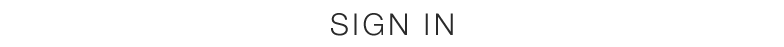
<style>
.page{position:relative;width:784px;height:47px;background:#ffffff}
.page>*{position:absolute;margin:0}
.t1{font:30px "HelveticaNeue-Light";letter-spacing:0.11em;color:#2a2a2a}
</style>
<div class="page">
<p class="t1" style="left:331px;top:13px;width:122px;height:23px">SIGN IN</p>
</div>
